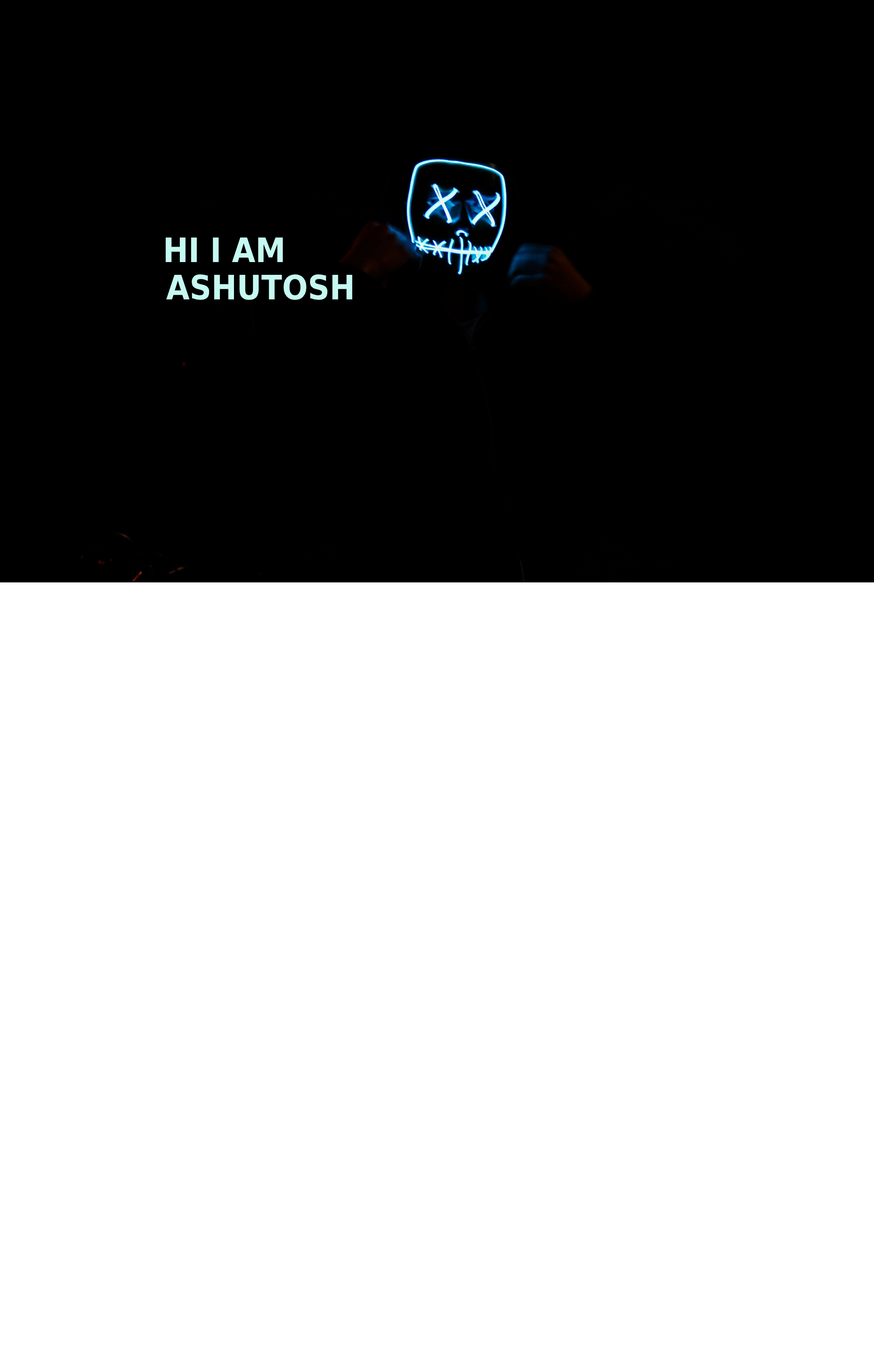
<style>
.page{position:relative;width:874px;height:1365px;background:#ffffff}
.page>*{position:absolute;margin:0}
.t1{font:33.7px "DejaVuSansCondensed-Bold";color:#c6f9f1}
</style>
<div class="page">
<p class="t1" style="left:166px;top:238px;width:117px;height:24px">HI I AM</p>
<p class="t1" style="left:166px;top:274px;width:186px;height:26px">ASHUTOSH</p>
</div>
